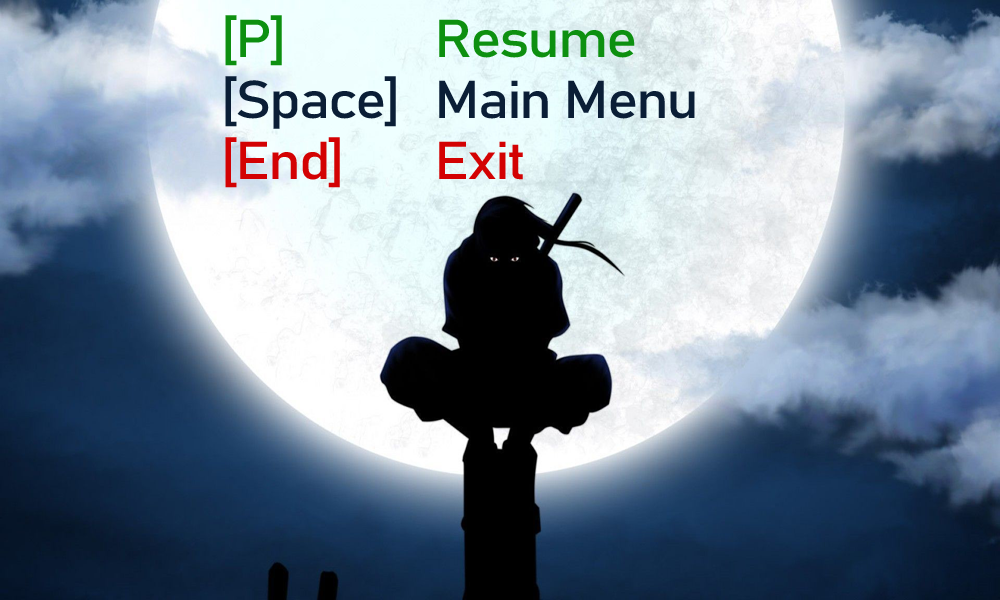
<style>
.page{position:relative;width:1000px;height:600px}
.page>*{position:absolute;margin:0}
.t1{font:52.5px/61px "Bahnschrift";letter-spacing:-0.04em;color:#0d9010;scale:1.12 1}
.t2{font:52.5px/61px "Bahnschrift";letter-spacing:-0.04em;color:#0a1e36;scale:1.12 1}
.t3{font:52.5px/61px "Bahnschrift";letter-spacing:-0.04em;color:#d30203;scale:1.12 1}
</style>
<div class="page">
<p class="t1" style="left:225px;top:15px;width:470px;height:173px">[P]          Resume<br><span class="t2">[Space]  Main Menu<br></span><span class="t3">[End]      Exit</span></p>
</div>
